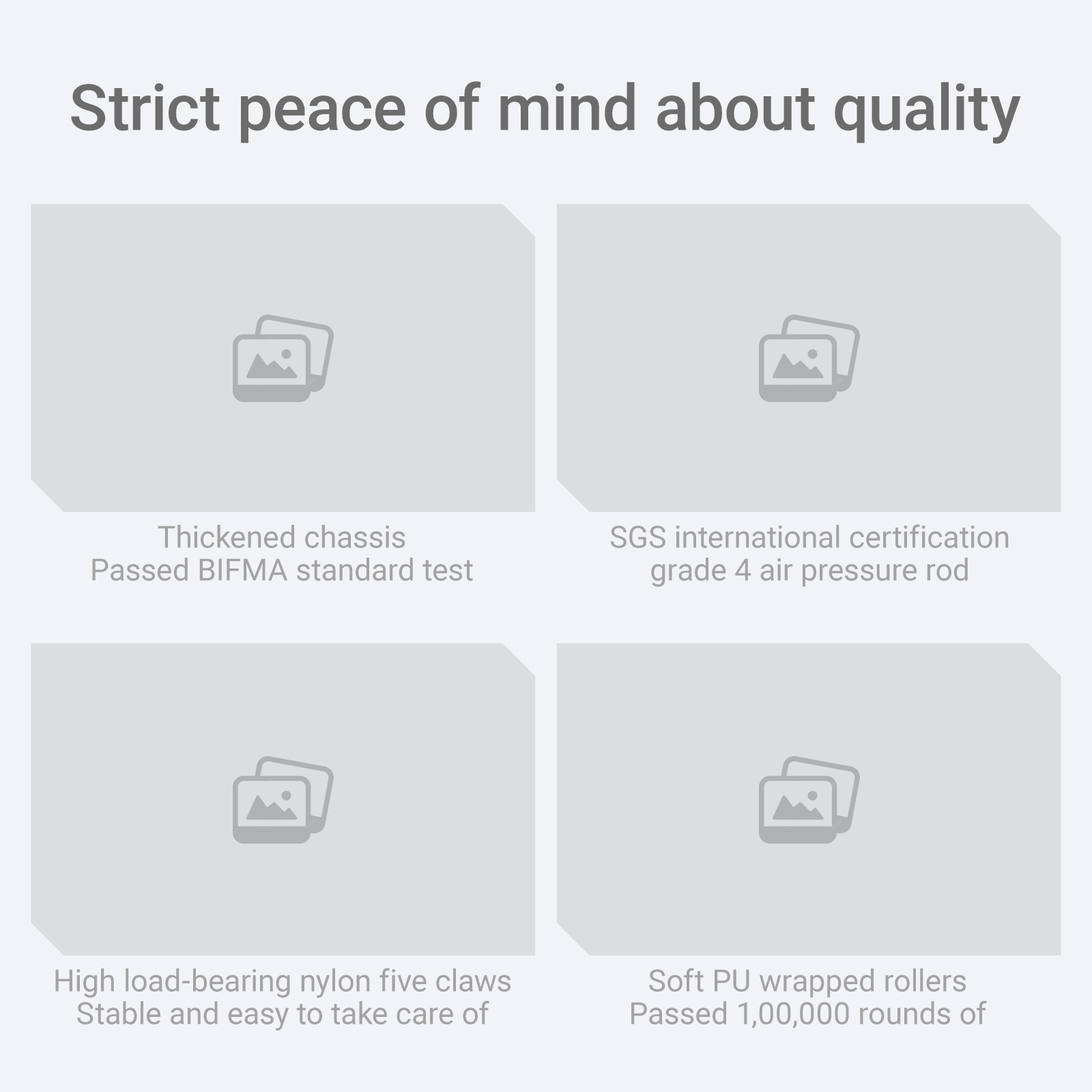
<style>
.page{position:relative;width:1092px;height:1092px;background:#dcdddf}
.page>*{position:absolute;margin:0}
.t1{font:64.1px "Roboto-Medium";color:#6c6c6c}
.t2{font:30.6px/32.8px "Roboto-Regular";color:#a3a3a3}
</style>
<div class="page">
<p class="t1" style="left:71px;top:81px;width:950px;height:63px">Strict peace of mind about quality</p>
<p class="t2" style="left:92px;top:525px;width:381px;height:56px;text-align:center">Thickened chassis<br>Passed BIFMA standard test</p>
<p class="t2" style="left:610px;top:524px;width:399px;height:63px;text-align:center">SGS international certification<br>grade 4 air pressure rod</p>
<p class="t2" style="left:55px;top:968px;width:456px;height:63px;text-align:center">High load-bearing nylon five claws<br>Stable and easy to take care of</p>
<p class="t2" style="left:631px;top:968px;width:356px;height:61px;text-align:center">Soft PU wrapped rollers<br>Passed 1,00,000 rounds of</p>
</div>
